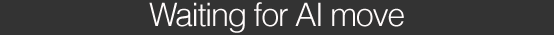
<style>
.page{position:relative;width:554px;height:35px;background:#333333}
.page>*{position:absolute;margin:0}
.t1{font:32.1px "Helvetica-Light";letter-spacing:-0.04em;color:#fffbfb}
</style>
<div class="page">
<p class="t1" style="left:149px;top:2px;width:255px;height:31px">Waiting for AI move</p>
</div>
